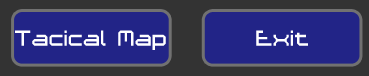
<style>
.page{position:relative;width:369px;height:76px;background:#222487}
.page>*{position:absolute;margin:0}
.t1{font:34.2px "Ace-Futurism";color:#ffffff}
</style>
<div class="page">
<p class="t1" style="left:15px;top:30px;width:151px;height:20px">Tacical Map</p>
<p class="t1" style="left:256px;top:30px;width:52px;height:16px">Exit</p>
</div>
